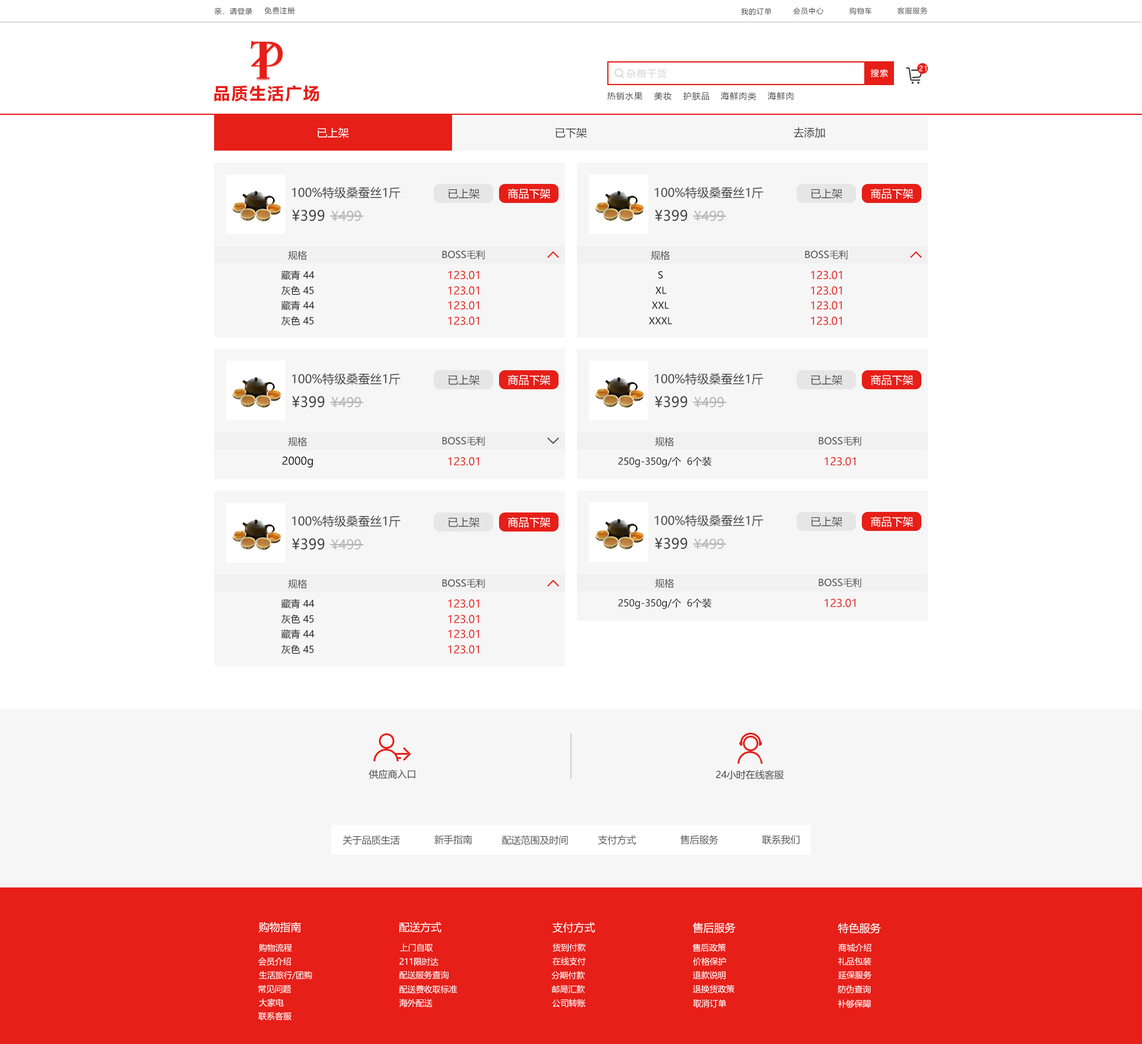
<style>
.page{position:relative;width:1142px;height:1044px;background:#ffffff}
.page>*{position:absolute;margin:0}
.t1{font:7.1px "MicrosoftYaHei";letter-spacing:0.08em;color:#404040}
.t2{font:7.1px "MicrosoftYaHei";letter-spacing:0.08em;color:#ffffff}
.t3{font:9.5px "MicrosoftYaHei";letter-spacing:0.08em;color:#d6d6d6}
.t4{font:8.3px "MicrosoftYaHei";letter-spacing:0.08em;color:#ffffff}
.t5{font:16.7px "MicrosoftYaHei-Bold";letter-spacing:0.08em;color:#e61f18}
.t6{font:8.3px "MicrosoftYaHei";letter-spacing:0.08em;color:#404040}
.t7{font:10.7px "MicrosoftYaHei";color:#ffffff}
.t8{font:10.7px "MicrosoftYaHei";color:#404040}
.t9{font:11.9px "MicrosoftYaHei";color:#404040}
.t10{font:10.7px "MicrosoftYaHei";color:#505050}
.t11{font:14.3px "MicrosoftYaHei";color:#404040}
.t12{font:13.1px "MicrosoftYaHei";color:#b4b4b4}
.t13{font:9.5px "MicrosoftYaHei";color:#505050}
.t14{font:9.5px "MicrosoftYaHei";color:#202020}
.t15{font:10.7px "MicrosoftYaHei";color:#e61f18}
.t16{font:10.7px "MicrosoftYaHei";color:#202020}
.t17{font:9.5px "MicrosoftYaHei";color:#404040}
.t18{font:8.3px "MicrosoftYaHei";color:#ffffff}
.t19{font:8.4px "MicrosoftYaHei";color:#ffffff}
</style>
<div class="page">
<p class="t1" style="left:214px;top:7px;width:38px;height:8px">亲，请登录</p>
<p class="t1" style="left:264px;top:7px;width:31px;height:7px">免费注册</p>
<p class="t1" style="left:741px;top:8px;width:31px;height:7px">我的订单</p>
<p class="t1" style="left:793px;top:7px;width:31px;height:8px">会员中心</p>
<p class="t1" style="left:850px;top:7px;width:22px;height:8px">购物车</p>
<p class="t1" style="left:897px;top:7px;width:31px;height:7px">客服服务</p>
<p class="t2" style="left:919px;top:65px;width:8px;height:6px">21</p>
<p class="t3" style="left:627px;top:68px;width:40px;height:11px">杂粮干货</p>
<p class="t4" style="left:871px;top:69px;width:17px;height:8px">搜索</p>
<p class="t5" style="left:214px;top:85px;width:106px;height:17px">品质生活广场</p>
<p class="t6" style="left:608px;top:92px;width:35px;height:9px">热销水果</p>
<p class="t6" style="left:655px;top:92px;width:17px;height:8px">美妆</p>
<p class="t6" style="left:684px;top:92px;width:25px;height:9px">护肤品</p>
<p class="t6" style="left:721px;top:92px;width:36px;height:9px">海鲜肉类</p>
<p class="t6" style="left:768px;top:92px;width:26px;height:9px">海鲜肉</p>
<p class="t7" style="left:317px;top:127px;width:32px;height:11px">已上架</p>
<p class="t8" style="left:556px;top:127px;width:31px;height:11px">已下架</p>
<p class="t8" style="left:794px;top:127px;width:31px;height:11px">去添加</p>
<p class="t9" style="left:292px;top:187px;width:108px;height:12px">100%特级桑蚕丝1斤</p>
<p class="t10" style="left:448px;top:188px;width:32px;height:11px">已上架</p>
<p class="t7" style="left:508px;top:188px;width:43px;height:11px">商品下架</p>
<p class="t9" style="left:655px;top:187px;width:108px;height:12px">100%特级桑蚕丝1斤</p>
<p class="t10" style="left:811px;top:188px;width:32px;height:11px">已上架</p>
<p class="t7" style="left:871px;top:188px;width:43px;height:11px">商品下架</p>
<p class="t11" style="left:292px;top:209px;width:33px;height:12px">¥399</p>
<p class="t11" style="left:655px;top:209px;width:33px;height:12px">¥399</p>
<p class="t12" style="left:331px;top:211px;width:30px;height:10px">¥499</p>
<p class="t12" style="left:694px;top:211px;width:30px;height:10px">¥499</p>
<p class="t13" style="left:288px;top:251px;width:19px;height:9px">规格</p>
<p class="t13" style="left:442px;top:250px;width:43px;height:9px">BOSS毛利</p>
<p class="t13" style="left:651px;top:251px;width:19px;height:9px">规格</p>
<p class="t13" style="left:805px;top:250px;width:43px;height:9px">BOSS毛利</p>
<p class="t14" style="left:281px;top:270px;width:34px;height:10px">藏青 44</p>
<p class="t15" style="left:448px;top:271px;width:32px;height:8px">123.01</p>
<p class="t14" style="left:658px;top:271px;width:5px;height:7px">S</p>
<p class="t15" style="left:811px;top:271px;width:32px;height:8px">123.01</p>
<p class="t14" style="left:281px;top:286px;width:33px;height:9px">灰色 45</p>
<p class="t15" style="left:448px;top:286px;width:32px;height:9px">123.01</p>
<p class="t14" style="left:656px;top:286px;width:11px;height:8px">XL</p>
<p class="t15" style="left:811px;top:286px;width:32px;height:9px">123.01</p>
<p class="t14" style="left:281px;top:300px;width:34px;height:10px">藏青 44</p>
<p class="t15" style="left:448px;top:301px;width:32px;height:8px">123.01</p>
<p class="t14" style="left:652px;top:301px;width:17px;height:8px">XXL</p>
<p class="t15" style="left:811px;top:301px;width:32px;height:8px">123.01</p>
<p class="t14" style="left:281px;top:316px;width:33px;height:9px">灰色 45</p>
<p class="t15" style="left:448px;top:317px;width:32px;height:8px">123.01</p>
<p class="t14" style="left:649px;top:317px;width:23px;height:7px">XXXL</p>
<p class="t15" style="left:811px;top:317px;width:32px;height:8px">123.01</p>
<p class="t9" style="left:292px;top:373px;width:108px;height:12px">100%特级桑蚕丝1斤</p>
<p class="t10" style="left:448px;top:374px;width:32px;height:11px">已上架</p>
<p class="t7" style="left:508px;top:374px;width:43px;height:12px">商品下架</p>
<p class="t9" style="left:655px;top:373px;width:108px;height:12px">100%特级桑蚕丝1斤</p>
<p class="t10" style="left:811px;top:374px;width:32px;height:11px">已上架</p>
<p class="t7" style="left:871px;top:374px;width:43px;height:12px">商品下架</p>
<p class="t11" style="left:292px;top:396px;width:33px;height:12px">¥399</p>
<p class="t12" style="left:331px;top:397px;width:30px;height:11px">¥499</p>
<p class="t11" style="left:655px;top:396px;width:33px;height:12px">¥399</p>
<p class="t12" style="left:694px;top:397px;width:30px;height:11px">¥499</p>
<p class="t13" style="left:288px;top:437px;width:19px;height:9px">规格</p>
<p class="t13" style="left:442px;top:436px;width:43px;height:10px">BOSS毛利</p>
<p class="t13" style="left:655px;top:437px;width:19px;height:9px">规格</p>
<p class="t13" style="left:819px;top:436px;width:43px;height:10px">BOSS毛利</p>
<p class="t16" style="left:282px;top:456px;width:31px;height:12px">2000g</p>
<p class="t15" style="left:448px;top:457px;width:32px;height:8px">123.01</p>
<p class="t14" style="left:618px;top:456px;width:94px;height:11px">250g-350g/个  6个装</p>
<p class="t15" style="left:825px;top:457px;width:31px;height:8px">123.01</p>
<p class="t9" style="left:292px;top:515px;width:108px;height:12px">100%特级桑蚕丝1斤</p>
<p class="t10" style="left:448px;top:517px;width:32px;height:10px">已上架</p>
<p class="t7" style="left:508px;top:517px;width:43px;height:11px">商品下架</p>
<p class="t9" style="left:655px;top:515px;width:108px;height:12px">100%特级桑蚕丝1斤</p>
<p class="t10" style="left:811px;top:516px;width:32px;height:11px">已上架</p>
<p class="t7" style="left:871px;top:516px;width:43px;height:11px">商品下架</p>
<p class="t11" style="left:292px;top:538px;width:33px;height:12px">¥399</p>
<p class="t12" style="left:331px;top:539px;width:30px;height:11px">¥499</p>
<p class="t11" style="left:655px;top:537px;width:33px;height:12px">¥399</p>
<p class="t12" style="left:694px;top:539px;width:30px;height:10px">¥499</p>
<p class="t13" style="left:288px;top:579px;width:19px;height:10px">规格</p>
<p class="t13" style="left:442px;top:578px;width:43px;height:10px">BOSS毛利</p>
<p class="t13" style="left:655px;top:578px;width:19px;height:10px">规格</p>
<p class="t13" style="left:819px;top:578px;width:43px;height:9px">BOSS毛利</p>
<p class="t14" style="left:281px;top:599px;width:34px;height:9px">藏青 44</p>
<p class="t15" style="left:448px;top:599px;width:32px;height:9px">123.01</p>
<p class="t14" style="left:618px;top:598px;width:94px;height:11px">250g-350g/个  6个装</p>
<p class="t15" style="left:825px;top:599px;width:31px;height:8px">123.01</p>
<p class="t14" style="left:281px;top:614px;width:33px;height:10px">灰色 45</p>
<p class="t15" style="left:448px;top:615px;width:32px;height:8px">123.01</p>
<p class="t14" style="left:281px;top:629px;width:34px;height:9px">藏青 44</p>
<p class="t15" style="left:448px;top:630px;width:32px;height:8px">123.01</p>
<p class="t14" style="left:281px;top:644px;width:33px;height:10px">灰色 45</p>
<p class="t15" style="left:448px;top:645px;width:32px;height:8px">123.01</p>
<p class="t17" style="left:369px;top:769px;width:46px;height:10px">供应商入口</p>
<p class="t17" style="left:716px;top:769px;width:68px;height:11px">24小时在线客服</p>
<p class="t13" style="left:343px;top:835px;width:57px;height:10px">关于品质生活</p>
<p class="t13" style="left:434px;top:834px;width:38px;height:10px">新手指南</p>
<p class="t13" style="left:502px;top:835px;width:66px;height:10px">配送范围及时间</p>
<p class="t13" style="left:598px;top:835px;width:39px;height:9px">支付方式</p>
<p class="t13" style="left:681px;top:835px;width:38px;height:9px">售后服务</p>
<p class="t13" style="left:762px;top:835px;width:38px;height:9px">联系我们</p>
<p class="t7" style="left:259px;top:922px;width:42px;height:10px">购物指南</p>
<p class="t7" style="left:399px;top:922px;width:43px;height:10px">配送方式</p>
<p class="t7" style="left:553px;top:922px;width:43px;height:10px">支付方式</p>
<p class="t7" style="left:693px;top:922px;width:43px;height:11px">售后服务</p>
<p class="t7" style="left:838px;top:922px;width:43px;height:12px">特色服务</p>
<p class="t18" style="left:259px;top:943px;width:33px;height:8px">购物流程</p>
<p class="t19" style="left:400px;top:943px;width:33px;height:8px">上门自取</p>
<p class="t18" style="left:553px;top:943px;width:33px;height:8px">货到付款</p>
<p class="t18" style="left:693px;top:943px;width:33px;height:8px">售后政策</p>
<p class="t18" style="left:838px;top:943px;width:34px;height:8px">商城介绍</p>
<p class="t18" style="left:258px;top:957px;width:33px;height:9px">会员介绍</p>
<p class="t19" style="left:399px;top:957px;width:40px;height:9px">211限时达</p>
<p class="t18" style="left:553px;top:957px;width:33px;height:8px">在线支付</p>
<p class="t18" style="left:693px;top:957px;width:34px;height:9px">价格保护</p>
<p class="t18" style="left:838px;top:957px;width:34px;height:8px">礼品包装</p>
<p class="t18" style="left:259px;top:971px;width:53px;height:8px">生活旅行/团购</p>
<p class="t19" style="left:399px;top:971px;width:50px;height:8px">配送服务查询</p>
<p class="t18" style="left:552px;top:971px;width:33px;height:8px">分期付款</p>
<p class="t18" style="left:693px;top:971px;width:33px;height:8px">退款说明</p>
<p class="t18" style="left:838px;top:971px;width:34px;height:8px">延保服务</p>
<p class="t18" style="left:258px;top:985px;width:34px;height:8px">常见问题</p>
<p class="t19" style="left:399px;top:985px;width:59px;height:8px">配送费收取标准</p>
<p class="t18" style="left:552px;top:985px;width:33px;height:8px">邮局汇款</p>
<p class="t18" style="left:693px;top:984px;width:42px;height:9px">退换货政策</p>
<p class="t18" style="left:838px;top:985px;width:33px;height:8px">防伪查询</p>
<p class="t18" style="left:259px;top:998px;width:25px;height:9px">大家电</p>
<p class="t19" style="left:399px;top:998px;width:34px;height:9px">海外配送</p>
<p class="t18" style="left:552px;top:998px;width:34px;height:9px">公司转账</p>
<p class="t18" style="left:693px;top:999px;width:34px;height:8px">取消订单</p>
<p class="t18" style="left:838px;top:999px;width:34px;height:9px">补够保障</p>
<p class="t18" style="left:258px;top:1012px;width:34px;height:8px">联系客服</p>
</div>
